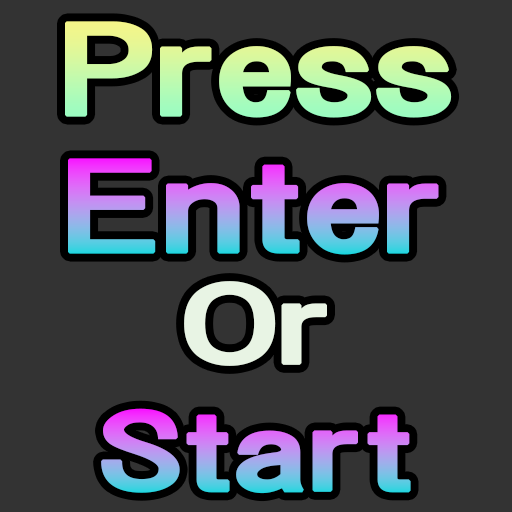
<style>
.page{position:relative;width:512px;height:512px;background:#333333}
.page>*{position:absolute;margin:0}
.t1{font:114.7px "HGPGothicE";letter-spacing:-0.07em;font-weight:bold;scale:1.6 1}
.t2{font:100px "HGPGothicE";letter-spacing:-0.07em;color:#e8f4e4;font-weight:bold;scale:1.6 1}
.t3{font:100px "HGPGothicE";letter-spacing:-0.07em;font-weight:bold;scale:1.6 1}
</style>
<div class="page">
<p class="t1" style="left:65px;top:21px;width:387px;height:97px">Press</p>
<p class="t1" style="left:68px;top:158px;width:371px;height:97px">Enter</p>
<p class="t2" style="left:184px;top:281px;width:143px;height:85px">Or</p>
<p class="t3" style="left:101px;top:408px;width:310px;height:86px">Start</p>
</div>
